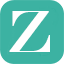
<style>
.page{position:relative;width:64px;height:64px;background:#3cb2a2}
.page>*{position:absolute;margin:0}
.t1{font:60px "EngraversMT";color:#ffffff}
</style>
<div class="page">
<p class="t1" style="left:9px;top:11px;width:41px;height:41px">Z</p>
</div>
